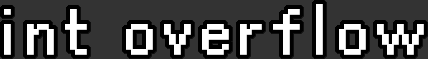
<style>
.page{position:relative;width:428px;height:59px;background:#333333}
.page>*{position:absolute;margin:0}
.t1{font:60px "Cubic_11";letter-spacing:0.1em;color:#ffffff;font-weight:bold}
</style>
<div class="page">
<p class="t1" style="left:4px;top:4px;width:420px;height:51px">int overflow</p>
</div>
